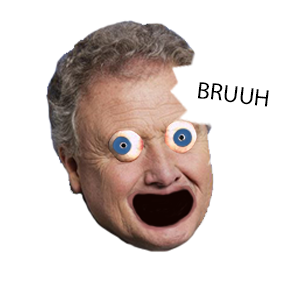
<style>
.page{position:relative;width:300px;height:300px;background:#ffffff}
.page>*{position:absolute;margin:0}
.t1{font:12.1px "MyriadPro-Regular";color:#000000}
</style>
<div class="page">
<p class="t1" style="left:197px;top:82px;width:72px;height:25px;rotate:7deg">BRUUH</p>
</div>
